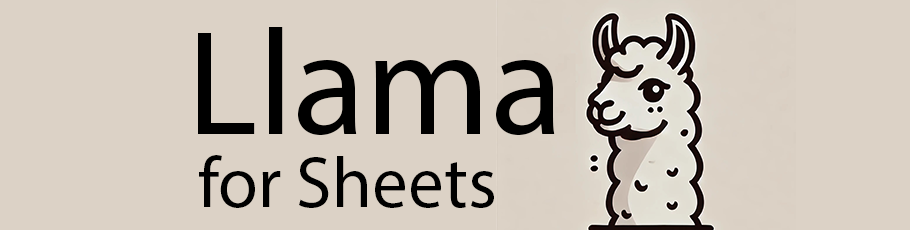
<style>
.page{position:relative;width:910px;height:230px;background:#dcd2c6}
.page>*{position:absolute;margin:0}
.t1{font:150px "MyriadPro-Regular";color:#000000}
.t2{font:72px "MyriadPro-Regular";color:#000000}
</style>
<div class="page">
<p class="t1" style="left:198px;top:27px;width:357px;height:108px">Llama</p>
<p class="t2" style="left:199px;top:155px;width:295px;height:53px">for Sheets</p>
</div>
